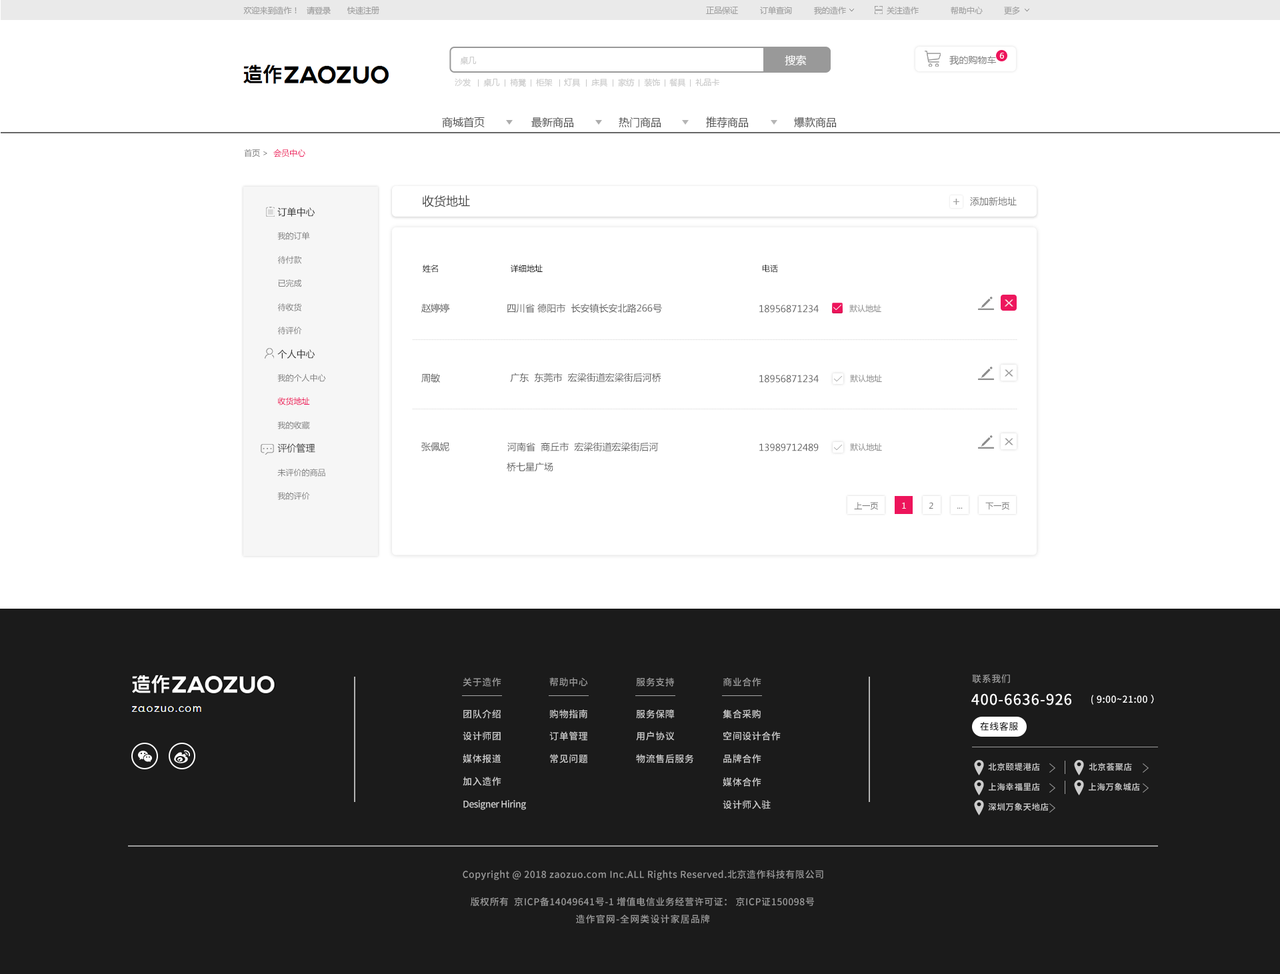
<style>
.page{position:relative;width:1280px;height:974px;background:#ffffff}
.page>*{position:absolute;margin:0}
.t1{font:8px "MicrosoftYaHei";color:#9f9f9f;text-transform:uppercase}
.t2{font:8px "MicrosoftYaHei";color:#ffffff;text-transform:uppercase}
.t3{font:8px "MicrosoftYaHei";color:#cacaca;text-transform:uppercase}
.t4{font:10.7px "MicrosoftYaHei";color:#ffffff;text-transform:uppercase}
.t5{font:9.3px "MicrosoftYaHei";color:#848484;text-transform:uppercase}
.t6{font:10.7px "MicrosoftYaHei";color:#535353;text-transform:uppercase}
.t7{font:8px "MicrosoftYaHei";color:#787878}
.t8{font:8px "MicrosoftYaHei";color:#ed145b}
.t9{font:12px "MicrosoftYaHei";color:#464646}
.t10{font:9.3px "MicrosoftYaHei";color:#787878}
.t11{font:9.3px "MicrosoftYaHei";color:#333333}
.t12{font:9.3px "MicrosoftYaHei"}
.t13{font:12.2px "MicrosoftYaHei";color:#9d9d9d}
.t14{font:8px "MicrosoftYaHei";color:#808080}
.t15{font:8px "MicrosoftYaHei";color:#1a1a1a}
.t16{font:8px "MicrosoftYaHei";color:#131313}
.t17{font:9.3px "MicrosoftYaHei";color:#616161}
.t18{font:8px "MicrosoftYaHei";color:#8d8d8d}
.t19{font:8.8px "MicrosoftYaHei";color:#fbdee5;scale:1.6 1}
.t20{font:8.8px "MicrosoftYaHei";color:#9a9a9a;scale:1.6 1}
.t21{font:9.3px/20px "MicrosoftYaHei";color:#616161}
.t22{font:8px "MicrosoftYaHei";color:#f9f0f0}
.t23{font:9.3px "SourceHanSansCN-Medium";letter-spacing:0.04em;color:#999999}
.t24{font:14.7px "SourceHanSansCN-Medium";letter-spacing:0.04em;color:#ffffff}
.t25{font:9.2px "SourceHanSansCN-Medium";letter-spacing:0.04em;color:#ffffff}
.t26{font:9.3px "SourceHanSansCN-Medium";letter-spacing:0.04em;color:#cccccc}
.t27{font:9.3px "SourceHanSansCN-Medium";letter-spacing:0.04em;color:#1b1b1b}
.t28{font:8.3px "SourceHanSansCN-Medium";letter-spacing:0.04em;color:#cccccc}
.t29{font:9.3px "SourceHanSansCN-Medium";letter-spacing:-0.04em;color:#cccccc}
.t30{font:9.3px "SourceHanSansCN-Medium";letter-spacing:0.08em;color:#999999}
</style>
<div class="page">
<p class="t1" style="left:243px;top:6px;width:136px;height:9px">欢迎来到造作！   请登录       快速注册</p>
<p class="t1" style="left:760px;top:6px;width:32px;height:9px">订单查询</p>
<p class="t1" style="left:814px;top:6px;width:32px;height:9px">我的造作</p>
<p class="t1" style="left:886px;top:6px;width:32px;height:9px">关注造作</p>
<p class="t1" style="left:950px;top:6px;width:32px;height:9px">帮助中心</p>
<p class="t1" style="left:1004px;top:6px;width:16px;height:9px">更多</p>
<p class="t1" style="left:706px;top:7px;width:32px;height:8px">正品保证</p>
<p class="t2" style="left:999px;top:53px;width:5px;height:6px">6</p>
<p class="t3" style="left:460px;top:56px;width:17px;height:9px">桌几</p>
<p class="t4" style="left:784px;top:55px;width:22px;height:10px">搜索</p>
<p class="t5" style="left:949px;top:55px;width:47px;height:10px">我的购物车</p>
<p class="t3" style="left:455px;top:78px;width:16px;height:9px">沙发</p>
<p class="t3" style="left:483px;top:78px;width:17px;height:9px">桌几</p>
<p class="t3" style="left:510px;top:78px;width:16px;height:9px">椅凳</p>
<p class="t3" style="left:536px;top:78px;width:16px;height:9px">柜架</p>
<p class="t3" style="left:618px;top:78px;width:16px;height:9px">家纺</p>
<p class="t3" style="left:644px;top:78px;width:16px;height:9px">装饰</p>
<p class="t3" style="left:669px;top:78px;width:17px;height:9px">餐具</p>
<p class="t3" style="left:564px;top:79px;width:16px;height:8px">灯具</p>
<p class="t3" style="left:591px;top:79px;width:17px;height:8px">床具</p>
<p class="t3" style="left:695px;top:79px;width:25px;height:7px">礼品卡</p>
<p class="t6" style="left:442px;top:117px;width:43px;height:11px">商城首页</p>
<p class="t6" style="left:531px;top:117px;width:43px;height:11px">最新商品</p>
<p class="t6" style="left:618px;top:117px;width:43px;height:11px">热门商品</p>
<p class="t6" style="left:706px;top:117px;width:42px;height:11px">推荐商品</p>
<p class="t6" style="left:794px;top:117px;width:42px;height:11px">爆款商品</p>
<p class="t7" style="left:244px;top:149px;width:23px;height:8px">首页 &gt;</p>
<p class="t8" style="left:273px;top:149px;width:32px;height:8px">会员中心</p>
<p class="t9" style="left:422px;top:195px;width:48px;height:12px">收货地址</p>
<p class="t10" style="left:970px;top:197px;width:46px;height:9px">添加新地址</p>
<p class="t11" style="left:277px;top:207px;width:38px;height:10px">订单中心</p>
<p class="t12" style="left:278px;top:207px;width:38px;height:10px">订单中心</p>
<p class="t13" style="left:952px;top:199px;width:7px;height:6px">+</p>
<p class="t14" style="left:277px;top:231px;width:33px;height:9px">我的订单</p>
<p class="t14" style="left:277px;top:256px;width:25px;height:8px">待付款</p>
<p class="t15" style="left:423px;top:265px;width:15px;height:8px">姓名</p>
<p class="t16" style="left:510px;top:265px;width:32px;height:8px">详细地址</p>
<p class="t16" style="left:762px;top:265px;width:16px;height:8px">电话</p>
<p class="t14" style="left:278px;top:279px;width:24px;height:8px">已完成</p>
<p class="t14" style="left:277px;top:303px;width:25px;height:8px">待收货</p>
<p class="t17" style="left:421px;top:303px;width:28px;height:10px">赵婷婷</p>
<p class="t17" style="left:507px;top:303px;width:155px;height:10px">四川省 德阳市  长安镇长安北路266号</p>
<p class="t17" style="left:759px;top:305px;width:59px;height:8px">18956871234</p>
<p class="t18" style="left:849px;top:305px;width:32px;height:8px">默认地址</p>
<p class="t19" style="left:1004px;top:299px;width:9px;height:8px">X</p>
<p class="t14" style="left:277px;top:327px;width:25px;height:8px">待评价</p>
<p class="t11" style="left:277px;top:349px;width:38px;height:10px">个人中心</p>
<p class="t14" style="left:277px;top:374px;width:49px;height:8px">我的个人中心</p>
<p class="t17" style="left:421px;top:373px;width:19px;height:10px">周敏</p>
<p class="t17" style="left:510px;top:373px;width:151px;height:10px">广东  东莞市  宏梁街道宏梁街后河桥</p>
<p class="t17" style="left:759px;top:375px;width:59px;height:8px">18956871234</p>
<p class="t18" style="left:850px;top:375px;width:32px;height:8px">默认地址</p>
<p class="t20" style="left:1004px;top:369px;width:9px;height:8px">X</p>
<p class="t8" style="left:278px;top:397px;width:32px;height:8px">收货地址</p>
<p class="t14" style="left:277px;top:421px;width:33px;height:8px">我的收藏</p>
<p class="t20" style="left:1004px;top:438px;width:9px;height:7px">X</p>
<p class="t11" style="left:277px;top:443px;width:38px;height:10px">评价管理</p>
<p class="t17" style="left:421px;top:442px;width:28px;height:9px">张佩妮</p>
<p class="t21" style="left:506px;top:442px;width:152px;height:30px">河南省  商丘市  宏梁街道宏梁街后河桥七星广场</p>
<p class="t17" style="left:759px;top:443px;width:59px;height:8px">13989712489</p>
<p class="t18" style="left:850px;top:443px;width:32px;height:8px">默认地址</p>
<p class="t14" style="left:277px;top:469px;width:48px;height:8px">未评价的商品</p>
<p class="t14" style="left:277px;top:492px;width:33px;height:8px">我的评价</p>
<p class="t7" style="left:854px;top:502px;width:24px;height:8px">上一页</p>
<p class="t22" style="left:902px;top:502px;width:4px;height:6px">1</p>
<p class="t7" style="left:928px;top:502px;width:5px;height:6px">2</p>
<p class="t7" style="left:957px;top:507px;width:5px;height:1px">...</p>
<p class="t7" style="left:985px;top:502px;width:24px;height:8px">下一页</p>
<p class="t23" style="left:463px;top:677px;width:38px;height:9px">关于造作</p>
<p class="t23" style="left:549px;top:677px;width:39px;height:9px">帮助中心</p>
<p class="t23" style="left:636px;top:677px;width:38px;height:9px">服务支持</p>
<p class="t23" style="left:723px;top:677px;width:38px;height:9px">商业合作</p>
<p class="t23" style="left:972px;top:674px;width:38px;height:9px">联系我们</p>
<p class="t24" style="left:971px;top:693px;width:100px;height:12px">400-6636-926</p>
<p class="t25" style="left:1091px;top:694px;width:63px;height:10px">( 9:00~21:00 ）</p>
<p class="t26" style="left:463px;top:709px;width:37px;height:9px">团队介绍</p>
<p class="t26" style="left:549px;top:709px;width:38px;height:9px">购物指南</p>
<p class="t26" style="left:636px;top:709px;width:38px;height:9px">服务保障</p>
<p class="t26" style="left:722px;top:709px;width:38px;height:9px">集合采购</p>
<p class="t27" style="left:980px;top:722px;width:38px;height:8px">在线客服</p>
<p class="t26" style="left:463px;top:731px;width:37px;height:9px">设计师团</p>
<p class="t26" style="left:549px;top:731px;width:38px;height:9px">订单管理</p>
<p class="t26" style="left:636px;top:731px;width:38px;height:9px">用户协议</p>
<p class="t26" style="left:723px;top:731px;width:57px;height:9px">空间设计合作</p>
<p class="t26" style="left:463px;top:754px;width:38px;height:9px">媒体报道</p>
<p class="t26" style="left:550px;top:754px;width:38px;height:9px">常见问题</p>
<p class="t26" style="left:636px;top:754px;width:58px;height:9px">物流售后服务</p>
<p class="t26" style="left:723px;top:754px;width:38px;height:9px">品牌合作</p>
<p class="t28" style="left:988px;top:762px;width:52px;height:8px">北京颐堤港店</p>
<p class="t28" style="left:1088px;top:762px;width:44px;height:8px">北京荟聚店</p>
<p class="t26" style="left:463px;top:776px;width:38px;height:10px">加入造作</p>
<p class="t26" style="left:722px;top:777px;width:39px;height:9px">媒体合作</p>
<p class="t28" style="left:988px;top:782px;width:52px;height:8px">上海幸福里店</p>
<p class="t28" style="left:1088px;top:782px;width:52px;height:8px">上海万象城店</p>
<p class="t29" style="left:463px;top:800px;width:63px;height:10px">Designer Hiring</p>
<p class="t26" style="left:722px;top:800px;width:48px;height:9px">设计师入驻</p>
<p class="t28" style="left:988px;top:802px;width:60px;height:8px">深圳万象天地店</p>
<p class="t23" style="left:463px;top:870px;width:360px;height:10px">Copyright @ 2018 zaozuo.com Inc.ALL Rights Reserved.北京造作科技有限公司</p>
<p class="t23" style="left:471px;top:896px;width:343px;height:10px">版权所有  京ICP备14049641号-1 增值电信业务经营许可证： 京ICP证150098号</p>
<p class="t30" style="left:576px;top:914px;width:134px;height:10px">造作官网-全网类设计家居品牌</p>
</div>
